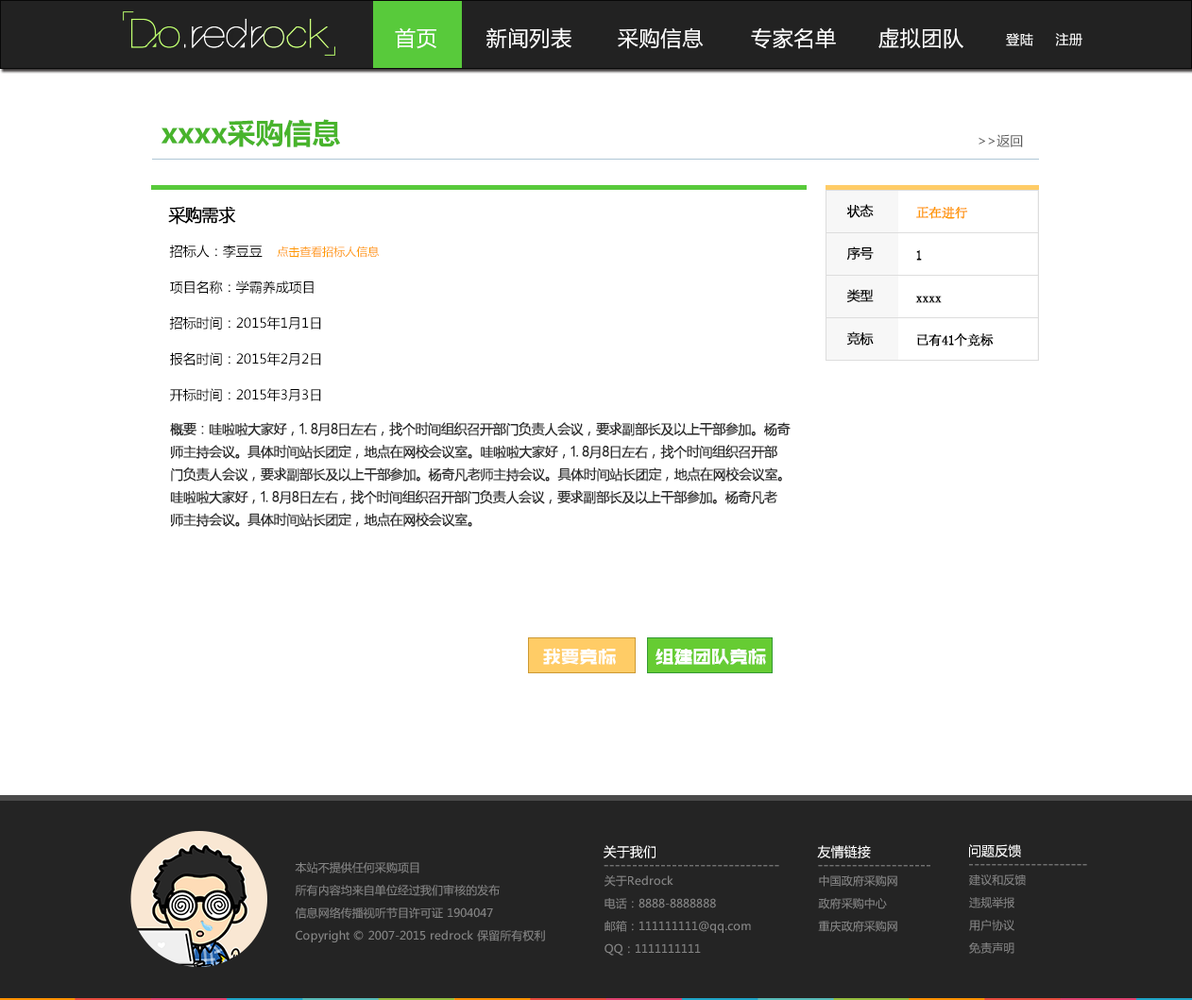
<style>
.page{position:relative;width:1192px;height:1000px;background:#ffffff}
.page>*{position:absolute;margin:0}
.t1{font:20.8px "MicrosoftYaHei";letter-spacing:0.035em;color:#ffffff}
.t2{font:13.2px "MicrosoftYaHei";letter-spacing:0.035em;color:#ffffff}
.t3{font:28.3px "MicrosoftYaHei-Bold";color:#48b42c}
.t4{font:13.2px "MicrosoftYaHei";color:#5b5b5b}
.t5{font:17px "MicrosoftYaHei";letter-spacing:-0.05em;color:#000000;font-weight:bold}
.t6{font:13.2px/42.5px "MicrosoftYaHeiLight";letter-spacing:-0.05em;color:#000000;font-weight:bold}
.t7{font:13.2px/42.5px "NSimSun";letter-spacing:-0.05em;color:#000000;font-weight:bold}
.t8{font:13.2px/42.5px "NSimSun";letter-spacing:-0.05em;color:#ff9900;font-weight:bold}
.t9{font:13.2px/35.9px "MicrosoftYaHei";color:#000000}
.t10{font:11.3px "MicrosoftYaHei";color:#ff9900}
.t11{font:13.2px/22.7px "MicrosoftYaHeiLight";letter-spacing:-0.05em;color:#2c2c2c;font-weight:bold}
.t12{font:18.9px "ZHSCNMT--GBK1-0";letter-spacing:-0.05em;color:#ffffff;font-weight:bold}
.t13{font:13.2px "MicrosoftYaHei";color:#ffffff}
.t14{font:11.3px/22.7px "MicrosoftYaHei";color:#858585}
.t15{font:13.2px "MicrosoftYaHei";color:#858585}
</style>
<div class="page">
<p class="t1" style="left:395px;top:27px;width:41px;height:22px">首页</p>
<p class="t1" style="left:486px;top:27px;width:85px;height:22px">新闻列表</p>
<p class="t1" style="left:618px;top:27px;width:86px;height:22px">采购信息</p>
<p class="t1" style="left:751px;top:27px;width:85px;height:22px">专家名单</p>
<p class="t1" style="left:878px;top:27px;width:85px;height:22px">虚拟团队</p>
<p class="t2" style="left:1006px;top:33px;width:76px;height:13px">登陆     注册</p>
<p class="t3" style="left:161px;top:119px;width:179px;height:28px">xxxx采购信息</p>
<p class="t4" style="left:979px;top:134px;width:44px;height:13px">&gt;&gt;返回</p>
<p class="t5" style="left:168px;top:207px;width:68px;height:18px">采购需求</p>
<p class="t6" style="left:846px;top:204px;width:28px;height:142px">状态<br>序号<br>类型<br>竞标</p>
<p class="t7" style="left:915px;top:207px;width:79px;height:140px"><span class="t8">正在进行<br></span>1<br>xxxx<br>已有41个竞标</p>
<p class="t9" style="left:169px;top:245px;width:152px;height:156px">招标人：李豆豆<br>项目名称：学霸养成项目<br>招标时间：2015年1月1日<br>报名时间：2015年2月2日<br>开标时间：2015年3月3日</p>
<p class="t10" style="left:277px;top:246px;width:103px;height:12px">点击查看招标人信息</p>
<p class="t11" style="left:170px;top:422px;width:621px;height:105px">概要：哇啦啦大家好，1. 8月8日左右，找个时间组织召开部门负责人会议，要求副部长及以上干部参加。杨奇<br>师主持会议。具体时间站长团定，地点在网校会议室。哇啦啦大家好，1. 8月8日左右，找个时间组织召开部<br>门负责人会议，要求副部长及以上干部参加。杨奇凡老师主持会议。具体时间站长团定，地点在网校会议室。<br>哇啦啦大家好，1. 8月8日左右，找个时间组织召开部门负责人会议，要求副部长及以上干部参加。杨奇凡老<br>师主持会议。具体时间站长团定，地点在网校会议室。</p>
<p class="t12" style="left:543px;top:648px;width:73px;height:17px">我要竞标</p>
<p class="t12" style="left:656px;top:649px;width:110px;height:16px">组建团队竞标</p>
<p class="t13" style="left:604px;top:845px;width:52px;height:14px">关于我们</p>
<p class="t13" style="left:817px;top:845px;width:54px;height:14px">友情链接</p>
<p class="t13" style="left:969px;top:844px;width:52px;height:14px">问题反馈</p>
<p class="t14" style="left:295px;top:862px;width:250px;height:81px">本站不提供任何采购项目<br>所有内容均来自单位经过我们审核的发布<br>信息网络传播视听节目许可证 1904047<br>Copyright © 2007-2015 redrock 保留所有权利</p>
<p class="t15" style="left:604px;top:865px;width:175px;height:2px">-------------------------------</p>
<p class="t15" style="left:818px;top:865px;width:112px;height:2px">--------------------</p>
<p class="t15" style="left:969px;top:864px;width:118px;height:2px">---------------------</p>
<p class="t14" style="left:605px;top:876px;width:146px;height:80px">关于Redrock<br>电话：8888-8888888<br>邮箱：111111111@qq.com<br>QQ：1111111111</p>
<p class="t14" style="left:818px;top:876px;width:79px;height:56px">中国政府采购网<br>政府采购中心<br>重庆政府采购网</p>
<p class="t14" style="left:969px;top:875px;width:57px;height:79px">建议和反馈<br>违规举报<br>用户协议<br>免责声明</p>
</div>
